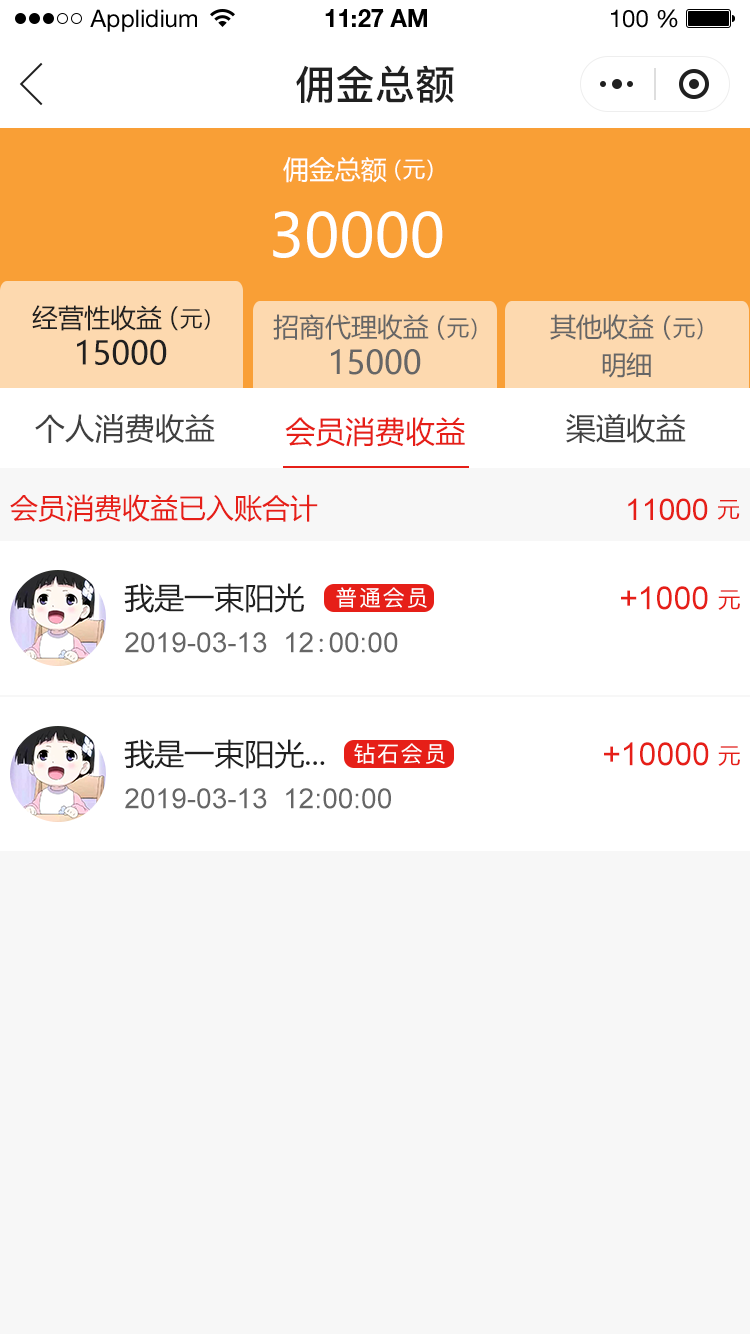
<style>
.page{position:relative;width:750px;height:1334px;background:#f7f7f7}
.page>*{position:absolute;margin:0}
.t1{font:24px "HelveticaNeueLTStd-Roman";color:#000000}
.t2{font:24px "HelveticaNeueLTStd-Bd";color:#000000}
.t3{font:40px "PingFang-SC-Bold";color:#202020;text-transform:uppercase}
.t4{font:26px "MicrosoftYaHei";color:#ffffff;text-transform:uppercase}
.t5{font:22px "MicrosoftYaHei";color:#ffffff;text-transform:uppercase}
.t6{font:60px "MicrosoftYaHei";color:#ffffff;text-transform:uppercase}
.t7{font:26px "MicrosoftYaHei";color:#202020;text-transform:uppercase}
.t8{font:22px "MicrosoftYaHei";color:#202020;text-transform:uppercase}
.t9{font:26.2px "MicrosoftYaHei";color:#666666;text-transform:uppercase}
.t10{font:22.2px "MicrosoftYaHei";color:#666666;text-transform:uppercase}
.t11{font:32px "MicrosoftYaHei";color:#202020;text-transform:uppercase}
.t12{font:32.2px "MicrosoftYaHei";color:#666666;text-transform:uppercase}
.t13{font:26px "MicrosoftYaHei";color:#666666;text-transform:uppercase}
.t14{font:30px "MicrosoftYaHei";color:#404040;text-transform:uppercase}
.t15{font:30px "MicrosoftYaHei";color:#e61f18;text-transform:uppercase}
.t16{font:28px "MicrosoftYaHei";color:#e61f18;text-transform:uppercase}
.t17{font:30px "ArialMT";color:#e61f18;text-transform:uppercase}
.t18{font:22px "MicrosoftYaHei";color:#e61f18;text-transform:uppercase}
.t19{font:30px "MicrosoftYaHei";color:#202020;text-transform:uppercase}
.t20{font:22px "PingFang-SC-Medium";letter-spacing:0.08em;color:#ffffff}
.t21{font:32px "ArialMT";color:#e61f18;text-transform:uppercase}
.t22{font:28px "ArialMT";color:#666666;text-transform:uppercase}
.t23{font:28px "SimSun";color:#666666;text-transform:uppercase}
</style>
<div class="page">
<p class="t1" style="left:90px;top:9px;width:107px;height:23px">Applidium</p>
<p class="t2" style="left:325px;top:9px;width:102px;height:18px">11:27 AM</p>
<p class="t1" style="left:611px;top:9px;width:67px;height:19px">100 %</p>
<p class="t3" style="left:296px;top:65px;width:158px;height:38px">佣金总额</p>
<p class="t4" style="left:283px;top:157px;width:104px;height:26px">佣金总额</p>
<p class="t5" style="left:395px;top:159px;width:38px;height:22px">（元）</p>
<p class="t6" style="left:273px;top:211px;width:170px;height:47px">30000</p>
<p class="t7" style="left:32px;top:305px;width:130px;height:26px">经营性收益</p>
<p class="t8" style="left:171px;top:306px;width:39px;height:25px"><span class="t7">（</span>元）</p>
<p class="t9" style="left:273px;top:314px;width:156px;height:26px">招商代理收益</p>
<p class="t10" style="left:438px;top:315px;width:39px;height:25px"><span class="t9">（</span>元）</p>
<p class="t9" style="left:550px;top:314px;width:104px;height:26px">其他收益</p>
<p class="t10" style="left:664px;top:315px;width:39px;height:25px"><span class="t9">（</span>元）</p>
<p class="t11" style="left:77px;top:339px;width:90px;height:26px">15000</p>
<p class="t12" style="left:331px;top:349px;width:90px;height:26px">15000</p>
<p class="t13" style="left:602px;top:352px;width:49px;height:26px">明细</p>
<p class="t14" style="left:35px;top:414px;width:180px;height:29px">个人消费收益</p>
<p class="t14" style="left:566px;top:413px;width:120px;height:30px">渠道收益</p>
<p class="t15" style="left:285px;top:417px;width:180px;height:30px">会员消费收益</p>
<p class="t16" style="left:10px;top:494px;width:308px;height:28px">会员消费收益已入账合计</p>
<p class="t17" style="left:628px;top:498px;width:80px;height:23px">11000</p>
<p class="t18" style="left:717px;top:500px;width:23px;height:20px">元</p>
<p class="t19" style="left:124px;top:583px;width:180px;height:30px">我是一束阳光</p>
<p class="t20" style="left:336px;top:587px;width:91px;height:21px">普通会员</p>
<p class="t21" style="left:621px;top:586px;width:87px;height:24px">+1000</p>
<p class="t18" style="left:718px;top:590px;width:22px;height:20px">元</p>
<p class="t22" style="left:125px;top:632px;width:273px;height:21px">2019-03-13  12<span class="t23">:</span>00:00</p>
<p class="t19" style="left:124px;top:739px;width:201px;height:30px">我是一束阳光...</p>
<p class="t20" style="left:354px;top:743px;width:91px;height:21px">钻石会员</p>
<p class="t21" style="left:604px;top:742px;width:105px;height:24px">+10000</p>
<p class="t18" style="left:718px;top:746px;width:22px;height:20px">元</p>
<p class="t22" style="left:125px;top:788px;width:266px;height:21px">2019-03-13  12:00:00</p>
</div>
